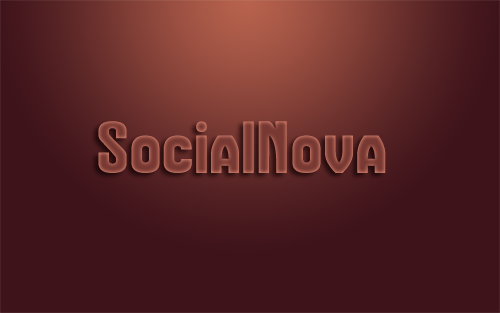
<style>
.page{position:relative;width:500px;height:313px;background:#3e131a}
.page>*{position:absolute;margin:0}
.t1{font:72px "DynastyMT";color:#85443c}
</style>
<div class="page">
<p class="t1" style="left:98px;top:121px;width:288px;height:52px">SocialNova</p>
</div>
